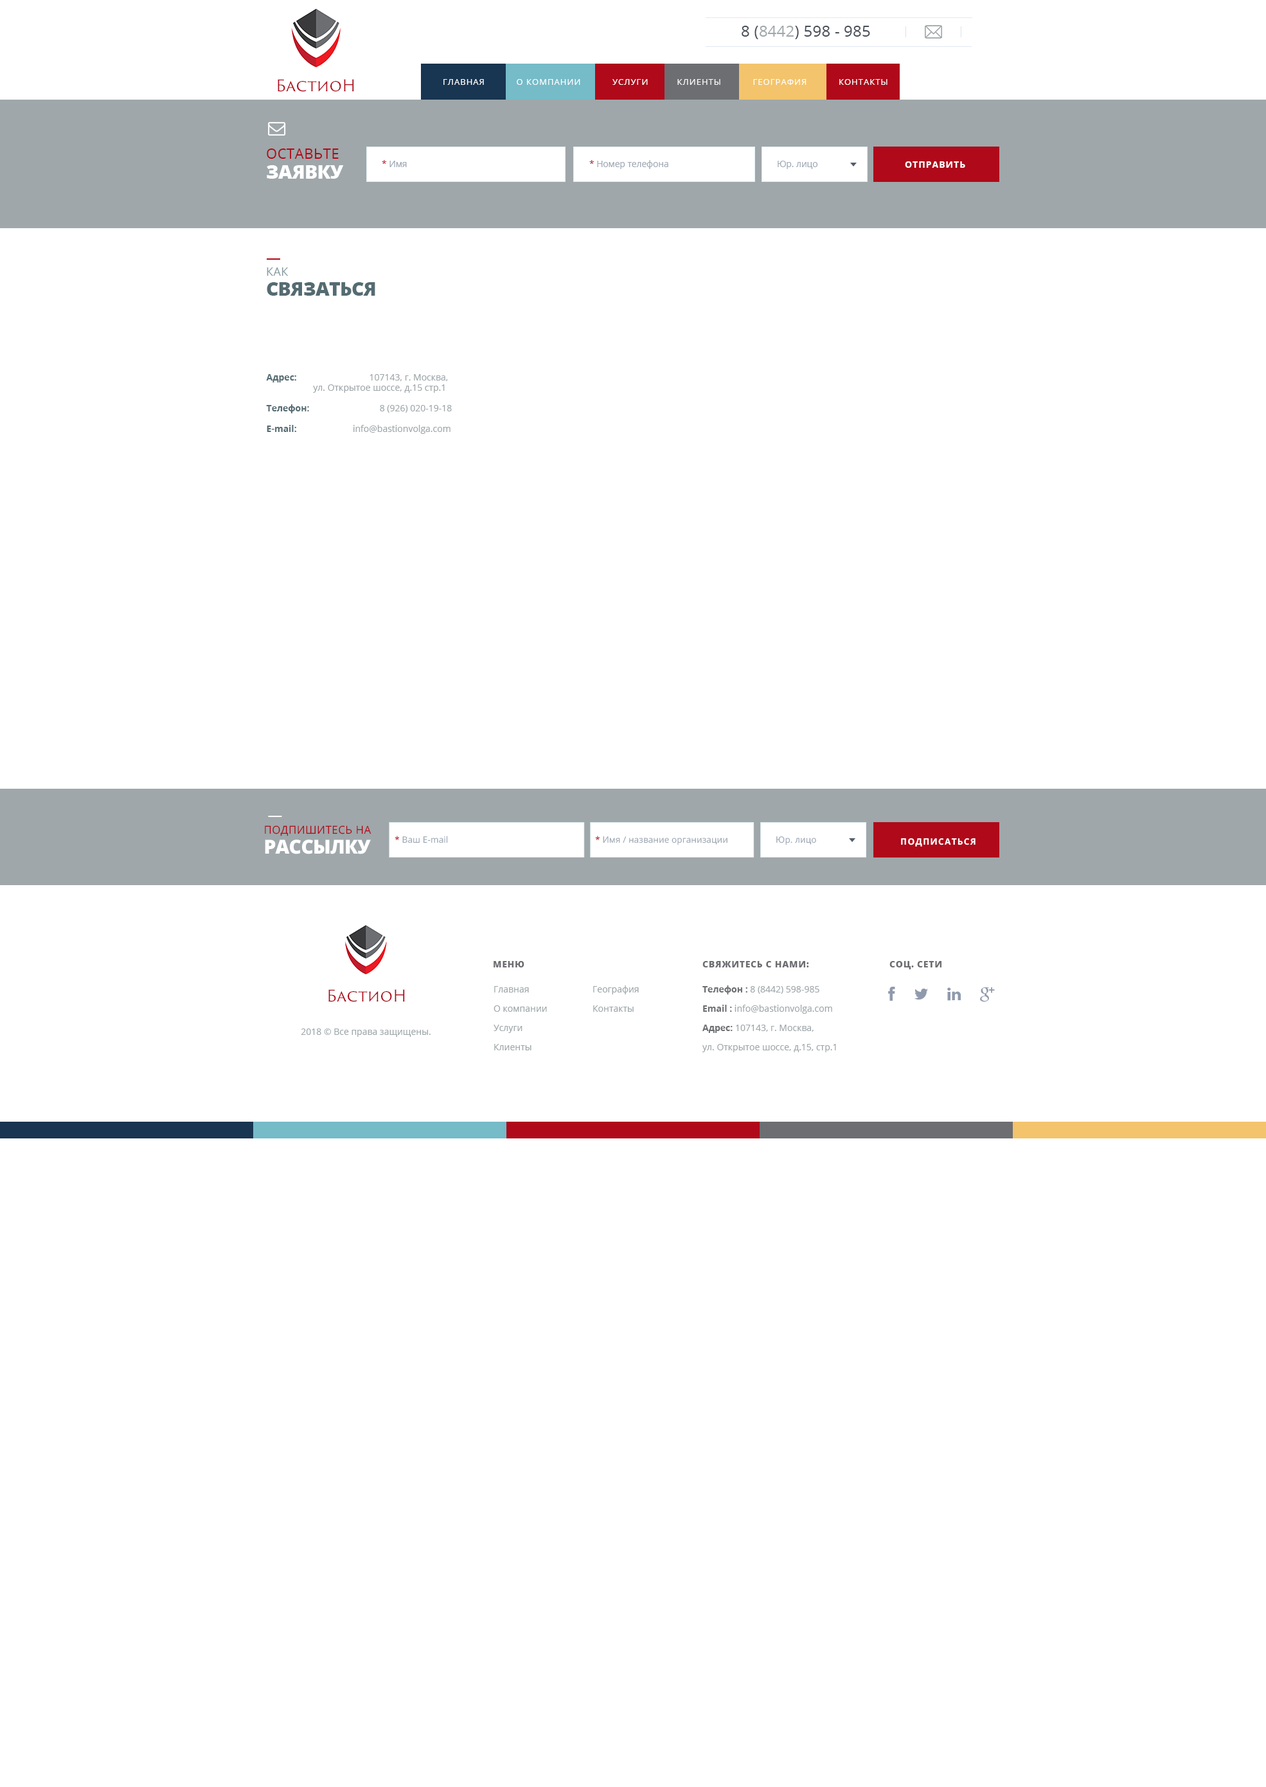
<style>
.page{position:relative;width:1266px;height:1787px;background:#ffffff}
.page>*{position:absolute;margin:0}
.t1{font:15.4px "OpenSans";letter-spacing:0.01em;color:#484e57}
.t2{font:15.4px "OpenSans";letter-spacing:0.01em;color:#9fa7aa}
.t3{font:15.7px "TrajanSansPro-Regular";color:#af091a}
.t4{font:8.4px "OpenSans";letter-spacing:0.08em;color:#fefefe;text-transform:uppercase}
.t5{font:14.1px/19.9px "OpenSans";letter-spacing:0.025em;color:#af091a;text-transform:uppercase}
.t6{font:19.3px/19.9px "OpenSans-Extrabold";letter-spacing:-0.025em;color:#ffffff;text-transform:uppercase}
.t7{font:8.7px "OpenSans";letter-spacing:0.01em;color:#a0a9b6}
.t8{font:8.7px "OpenSans";letter-spacing:0.01em;color:#af091a}
.t9{font:8.7px "OpenSans-Bold";letter-spacing:0.1em;color:#ffffff;text-transform:uppercase}
.t10{font:19.3px/19.9px "OpenSans-Extrabold";letter-spacing:-0.025em;color:#556b72;text-transform:uppercase}
.t11{font:11.6px/19.9px "OpenSans";letter-spacing:0.025em;color:#859aa1;text-transform:uppercase}
.t12{font:9px/10.3px "OpenSans";color:#9fa7aa}
.t13{font:9px/10.3px "OpenSans-Bold";color:#556b72}
.t14{font:10.9px/19.9px "OpenSans";letter-spacing:0.025em;color:#af091a;text-transform:uppercase}
.t15{font:9px "OpenSans-Extrabold";letter-spacing:0.05em;color:#6d6e72;text-transform:uppercase}
.t16{font:9px/19.3px "OpenSans";color:#9fa7aa}
.t17{font:9px/19.3px "OpenSans-Bold";color:#6d6e72}
.t18{font:9px "OpenSans";color:#9fa7aa}
</style>
<div class="page">
<p class="t1" style="left:742px;top:26px;width:128px;height:13px">8 (<span class="t2">8442</span>) 598 - 985</p>
<p class="t3" style="left:278px;top:79px;width:76px;height:13px">БастиоН</p>
<p class="t4" style="left:444px;top:79px;width:444px;height:6px">Главная           О КОМПАНИИ           УСЛУГИ          КЛИЕНТЫ           География           КОНТАКТЫ</p>
<p class="t4" style="left:444px;top:79px;width:444px;height:6px">Главная           О КОМПАНИИ           УСЛУГИ          КЛИЕНТЫ           География           КОНТАКТЫ</p>
<p class="t5" style="left:267px;top:148px;width:77px;height:31px">оставьте <br><span class="t6">ЗАЯВКУ</span></p>
<p class="t7" style="left:382px;top:160px;width:25px;height:7px"><span class="t8">* </span>Имя</p>
<p class="t7" style="left:590px;top:160px;width:79px;height:9px"><span class="t8">* </span>Номер телефона</p>
<p class="t7" style="left:778px;top:161px;width:40px;height:8px">Юр. лицо</p>
<p class="t9" style="left:905px;top:161px;width:61px;height:7px">ОТПРАВИТЬ</p>
<p class="t10" style="left:267px;top:267px;width:108px;height:29px"><span class="t11">как<br></span>связаться</p>
<p class="t12" style="left:266px;top:374px;width:186px;height:60px"><span class="t13">Адрес:                               </span>107143, г. Москва, <br>                    ул. Открытое шоссе, д.15 стр.1<br><br><span class="t13">Телефон:                              </span>8 (926) 020-19-18<br><br><span class="t13">E-mail:                        </span>info@bastionvolga.com</p>
<p class="t14" style="left:265px;top:825px;width:107px;height:29px">подпишитесь на<br><span class="t6">рассылку</span></p>
<p class="t7" style="left:395px;top:836px;width:53px;height:7px"><span class="t8">* </span>Ваш E-mail</p>
<p class="t7" style="left:595px;top:836px;width:133px;height:9px"><span class="t8">* </span>Имя / название организации</p>
<p class="t7" style="left:777px;top:836px;width:39px;height:9px">Юр. лицо</p>
<p class="t9" style="left:901px;top:838px;width:75px;height:9px">подписаться</p>
<p class="t15" style="left:494px;top:961px;width:31px;height:7px">меню</p>
<p class="t15" style="left:703px;top:961px;width:106px;height:7px">свяжитесь с нами:</p>
<p class="t15" style="left:890px;top:961px;width:52px;height:8px">соц. сети</p>
<p class="t3" style="left:328px;top:989px;width:77px;height:13px">БастиоН</p>
<p class="t16" style="left:494px;top:986px;width:53px;height:64px">Главная<br>О компании<br>Услуги<br>Клиенты</p>
<p class="t16" style="left:593px;top:986px;width:46px;height:26px">География<br>Контакты</p>
<p class="t16" style="left:703px;top:986px;width:133px;height:66px"><span class="t17">Телефон : </span>8 (8442) 598-985<br><span class="t17">Email : </span>info@bastionvolga.com<br><span class="t17">Адрес: </span>107143, г. Москва,<br>ул. Открытое шоссе, д.15, стр.1</p>
<p class="t18" style="left:301px;top:1029px;width:130px;height:8px">2018 © Все права защищены.</p>
</div>
